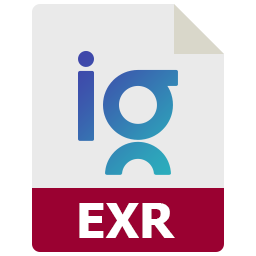
<style>
.page{position:relative;width:256px;height:256px;background:#eaeaea}
.page>*{position:absolute;margin:0}
.t1{font:48px "Tahoma-Bold";color:#ffffff}
</style>
<div class="page">
<p class="t1" style="left:79px;top:203px;width:96px;height:35px">EXR</p>
</div>
